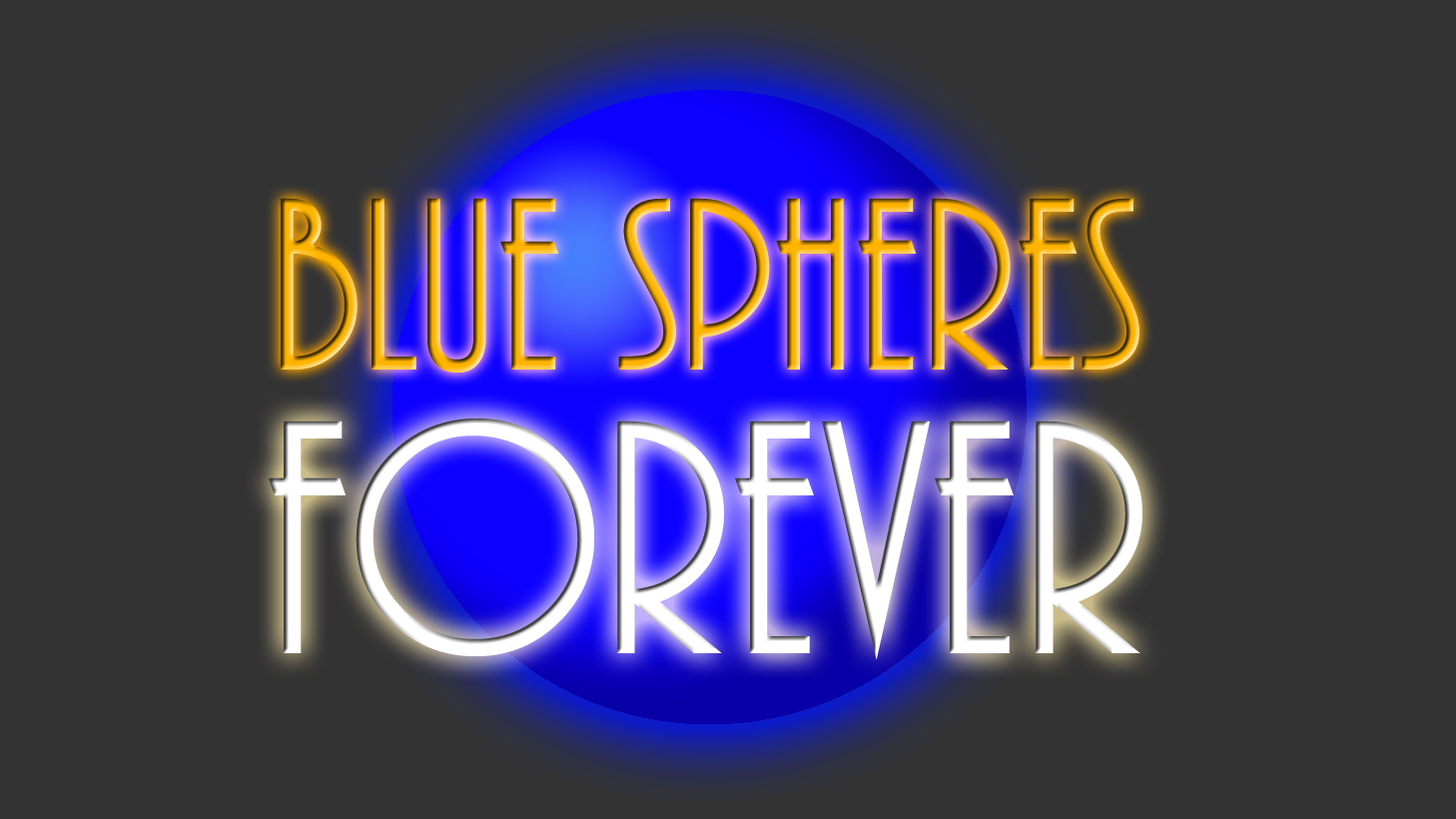
<style>
.page{position:relative;width:1456px;height:819px;background:#333333}
.page>*{position:absolute;margin:0}
.t1{font:255.7px "ARBONNIE"}
.t2{font:347.5px "ARBONNIE";color:#ffffff}
</style>
<div class="page">
<p class="t1" style="left:281px;top:198px;width:859px;height:175px">BLUE spheres</p>
<p class="t2" style="left:269px;top:417px;width:874px;height:242px">Forever</p>
</div>
